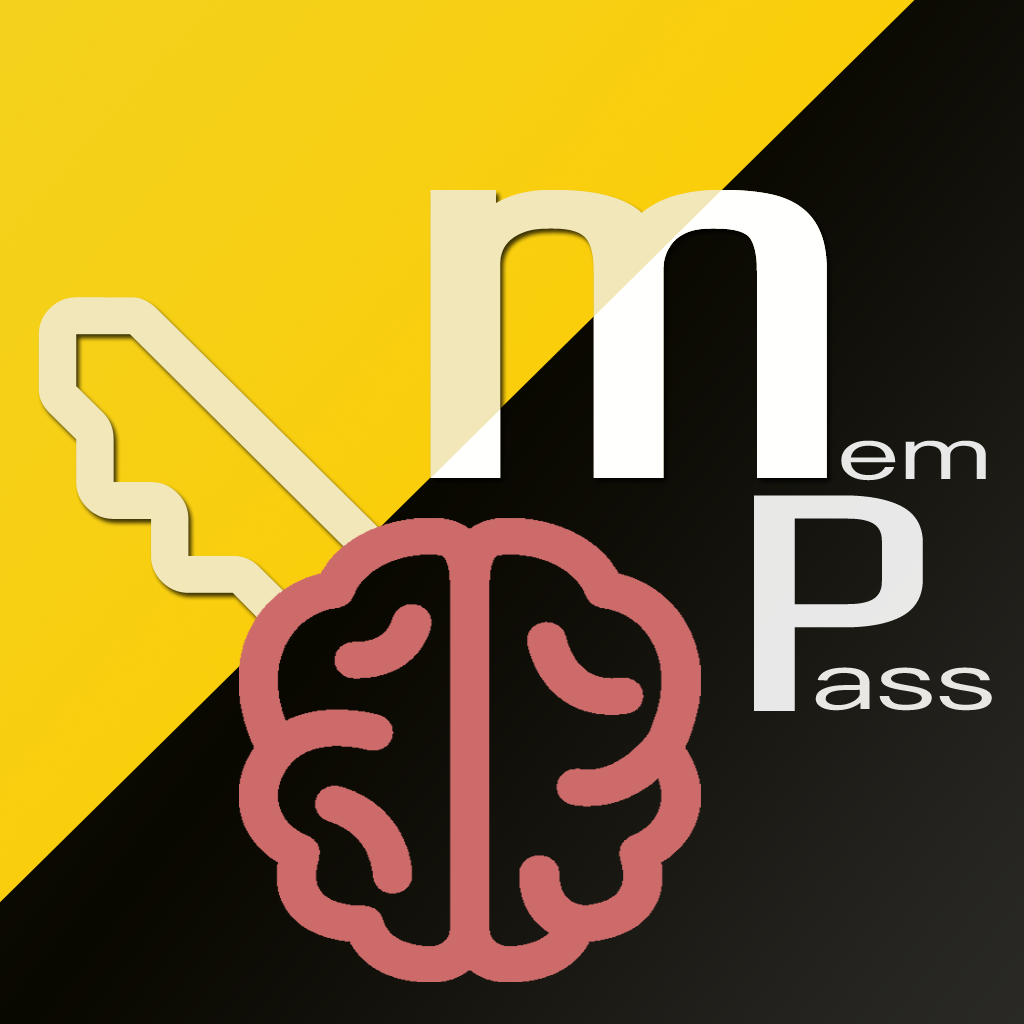
<style>
.page{position:relative;width:1024px;height:1024px}
.page>*{position:absolute;margin:0}
.t1{font:576px "Share-TechMono";letter-spacing:0.09em;scale:1.52 1}
.t2{font:72px "PingFangSC-Regular";color:#ffffff;scale:1.52 1}
.t3{font:308px "Share-TechMono";letter-spacing:0.09em;color:#ffffff;scale:1.52 1}
.t4{font:77.7px "PingFangSC-Regular";color:#fefdfa;scale:1.51 1}
</style>
<div class="page">
<p class="t1" style="left:430px;top:190px;width:397px;height:288px">m</p>
<p class="t1" style="left:430px;top:190px;width:397px;height:288px">m</p>
<p class="t2" style="left:841px;top:440px;width:145px;height:41px;opacity:0.9">em</p>
<p class="t3" style="left:754px;top:495px;width:169px;height:216px;opacity:0.9">P</p>
<p class="t4" style="left:815px;top:667px;width:177px;height:44px;opacity:0.9">ass</p>
</div>
